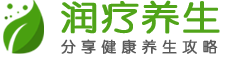
<style>
.page{position:relative;width:230px;height:60px;background:#ffffff}
.page>*{position:absolute;margin:0}
.t1{font:33.6px "STYuanti-SC-Regular";letter-spacing:0.05em;color:#49a010;font-weight:bold;scale:1.13 1}
.t2{font:14.4px "STYuanti-SC-Regular";letter-spacing:0.05em;color:#5a5a5a;font-weight:bold}
</style>
<div class="page">
<p class="t1" style="left:61px;top:0px;width:159px;height:34px;opacity:0.96">润疗养生</p>
<p class="t2" style="left:61px;top:39px;width:157px;height:15px">分 享 健 康 养 生 攻 略</p>
</div>
